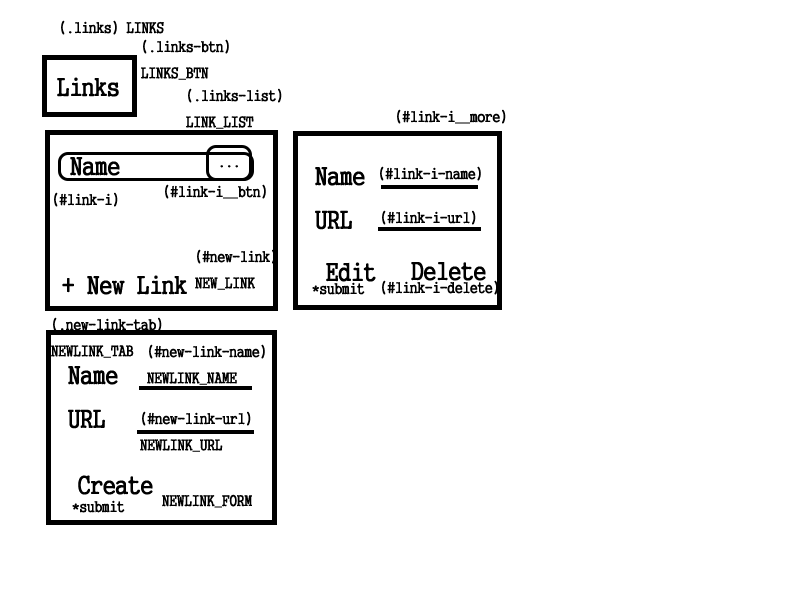
<style>
.page{position:relative;width:800px;height:600px;background:#ffffff}
.page>*{position:absolute;margin:0}
.t1{font:15px "GungsuhChe";color:#000000}
.t2{font:25px "GungsuhChe";color:#000000}
</style>
<div class="page">
<p class="t1" style="left:61px;top:20px;width:103px;height:15px">(.links) LINKS</p>
<p class="t1" style="left:141px;top:39px;width:88px;height:41px">(.links-btn)<br>LINKS_BTN</p>
<p class="t2" style="left:57px;top:77px;width:62px;height:20px">Links</p>
<p class="t1" style="left:186px;top:88px;width:96px;height:41px">(.links-list)<br>LINK_LIST</p>
<p class="t1" style="left:397px;top:109px;width:109px;height:15px">(#link-i__more)</p>
<p class="t2" style="left:70px;top:157px;width:50px;height:19px">Name</p>
<p class="t1" style="left:220px;top:165px;width:18px;height:3px">...</p>
<p class="t2" style="left:315px;top:167px;width:50px;height:63px">Name<br>URL</p>
<p class="t1" style="left:380px;top:166px;width:101px;height:15px">(#link-i-name)</p>
<p class="t1" style="left:165px;top:184px;width:101px;height:15px">(#link-i__btn)</p>
<p class="t1" style="left:54px;top:192px;width:64px;height:15px">(#link-i)</p>
<p class="t1" style="left:382px;top:210px;width:94px;height:15px">(#link-i-url)</p>
<p class="t1" style="left:195px;top:249px;width:81px;height:41px">(#new-link)<br>NEW_LINK</p>
<p class="t2" style="left:326px;top:262px;width:50px;height:20px">Edit</p>
<p class="t2" style="left:411px;top:262px;width:75px;height:19px">Delete</p>
<p class="t2" style="left:62px;top:275px;width:125px;height:20px">+ New Link</p>
<p class="t1" style="left:382px;top:280px;width:116px;height:15px">(#link-i-delete)</p>
<p class="t1" style="left:312px;top:282px;width:53px;height:13px">*submit</p>
<p class="t1" style="left:51px;top:317px;width:111px;height:41px">(.new-link-tab)<br>NEWLINK_TAB</p>
<p class="t1" style="left:147px;top:344px;width:118px;height:41px">(#new-link-name)<br>NEWLINK_NAME</p>
<p class="t2" style="left:68px;top:366px;width:50px;height:63px">Name<br>URL</p>
<p class="t1" style="left:140px;top:411px;width:111px;height:41px">(#new-link-url)<br>NEWLINK_URL</p>
<p class="t2" style="left:78px;top:475px;width:75px;height:20px">Create</p>
<p class="t1" style="left:162px;top:494px;width:90px;height:14px">NEWLINK_FORM</p>
<p class="t1" style="left:72px;top:500px;width:53px;height:13px">*submit</p>
</div>
